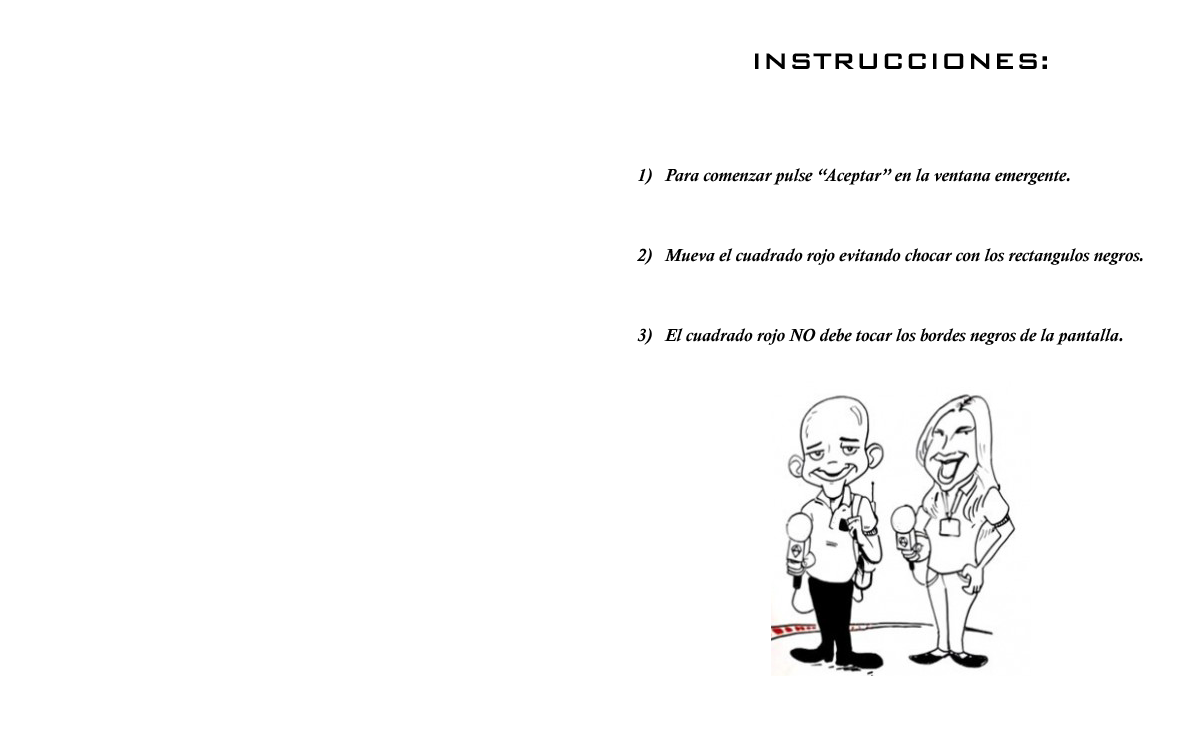
<style>
.page{position:relative;width:1200px;height:750px;background:#ffffff}
.page>*{position:absolute;margin:0}
.t1{font:18px/40px "CalistoMT-BoldItalic";color:#000000}
.t2{font:30px/4.3px "BankGothicBT-Medium";color:#000000}
.t3{font:18px/48px "CalistoMT-BoldItalic";color:#000000}
</style>
<div class="page">
<p class="t1" style="left:637px;top:53px;width:506px;height:292px;text-align:center"><span class="t2">INSTRUCCIONES:<br><br><br><br><br><br><br><br><br><br><br><br><br><br><br><br></span>1<span class="t3">)   Para comenzar p</span>ulse “Aceptar” en la ventana emergente.<br><br>2)   Mueva el cuadrado rojo evitando chocar con los rectangulos negros.<br><br>3)   El cuadrado rojo NO debe tocar los bordes negros de la pantalla.</p>
</div>
